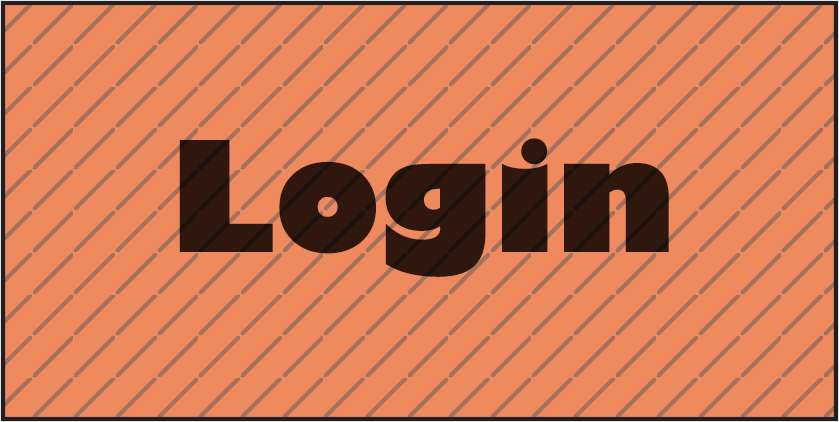
<style>
.page{position:relative;width:839px;height:422px;background:#ee8a5e}
.page>*{position:absolute;margin:0}
.t1{font:150px "GillSans-UltraBold";color:#30170d}
</style>
<div class="page">
<p class="t1" style="left:179px;top:138px;width:490px;height:139px">Login</p>
</div>
